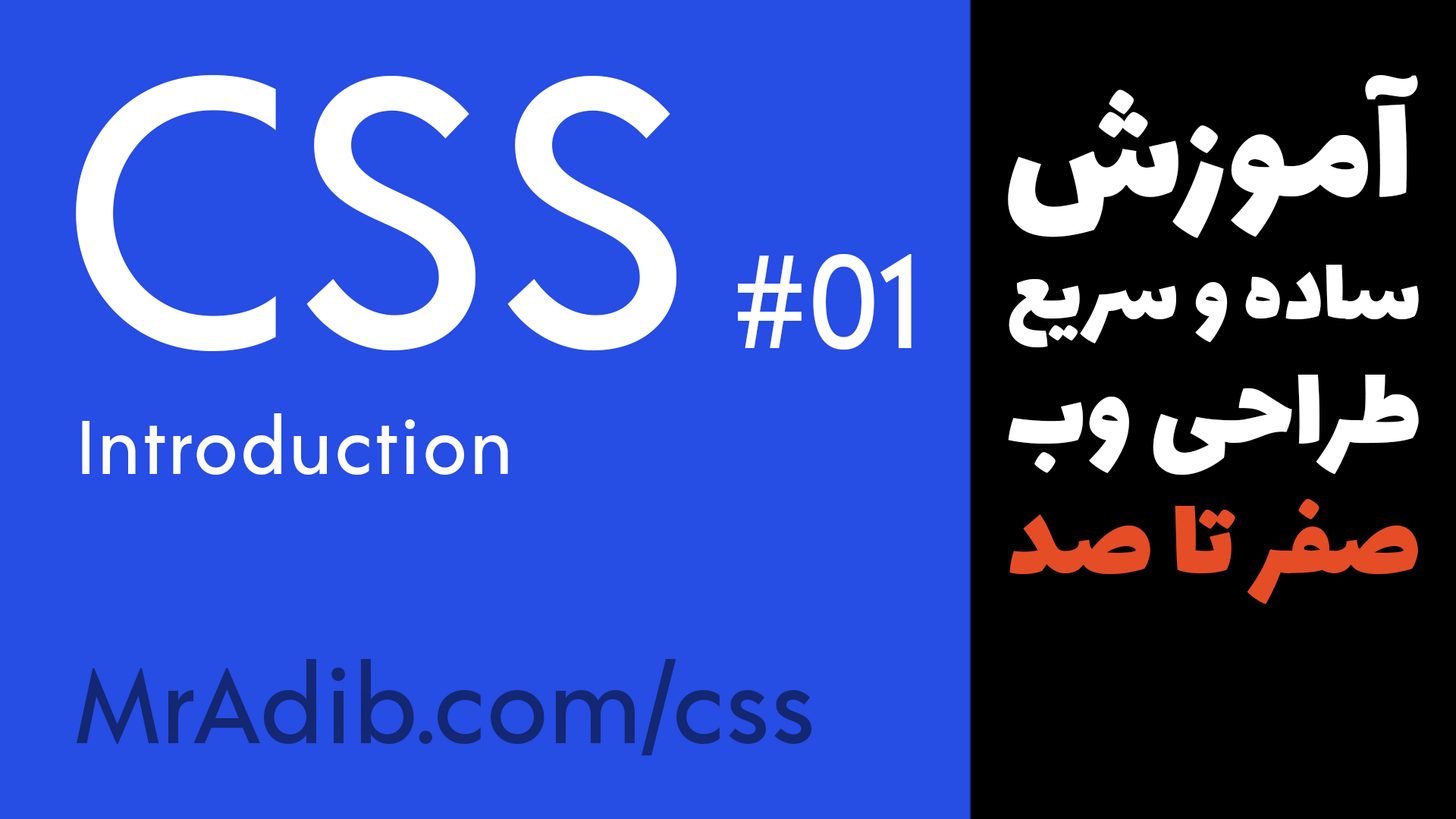
<style>
.page{position:relative;width:1456px;height:819px;background:#264de4}
.page>*{position:absolute;margin:0}
.t1{font:381.8px "Acre-Medium";color:#ffffff}
.t2{font:162.5px "Lalezar-Regular";color:#ffffff}
.t3{font:132.7px "Acre-Medium";color:#ffffff}
.t4{font:96.1px "Lalezar-Regular";color:#ffffff}
.t5{font:121.8px "Lalezar-Regular";color:#ffffff}
.t6{font:75.8px "Acre-Medium";letter-spacing:0.025em;color:#ffffff}
.t7{font:120.3px "Lalezar-Regular";color:#e44d26}
.t8{font:104.8px "Acre-Medium";color:#132774}
</style>
<div class="page">
<p class="t1" style="left:76px;top:75px;width:600px;height:276px">CSS</p>
<p class="t2" style="left:1008px;top:75px;width:410px;height:163px">آموزش</p>
<p class="t2" style="left:1008px;top:75px;width:410px;height:163px">آموزش</p>
<p class="t3" style="left:738px;top:254px;width:174px;height:96px">#01</p>
<p class="t4" style="left:1009px;top:265px;width:410px;height:82px">ساده و سریع</p>
<p class="t4" style="left:1009px;top:265px;width:410px;height:82px">ساده و سریع</p>
<p class="t5" style="left:1008px;top:375px;width:411px;height:100px">طراحی وب</p>
<p class="t5" style="left:1008px;top:375px;width:411px;height:100px">طراحی وب</p>
<p class="t6" style="left:82px;top:413px;width:426px;height:62px">Introduction</p>
<p class="t7" style="left:1009px;top:499px;width:409px;height:105px">صفر تا صد</p>
<p class="t7" style="left:1009px;top:499px;width:409px;height:105px">صفر تا صد</p>
<p class="t8" style="left:77px;top:659px;width:734px;height:97px">MrAdib.com/css</p>
</div>
